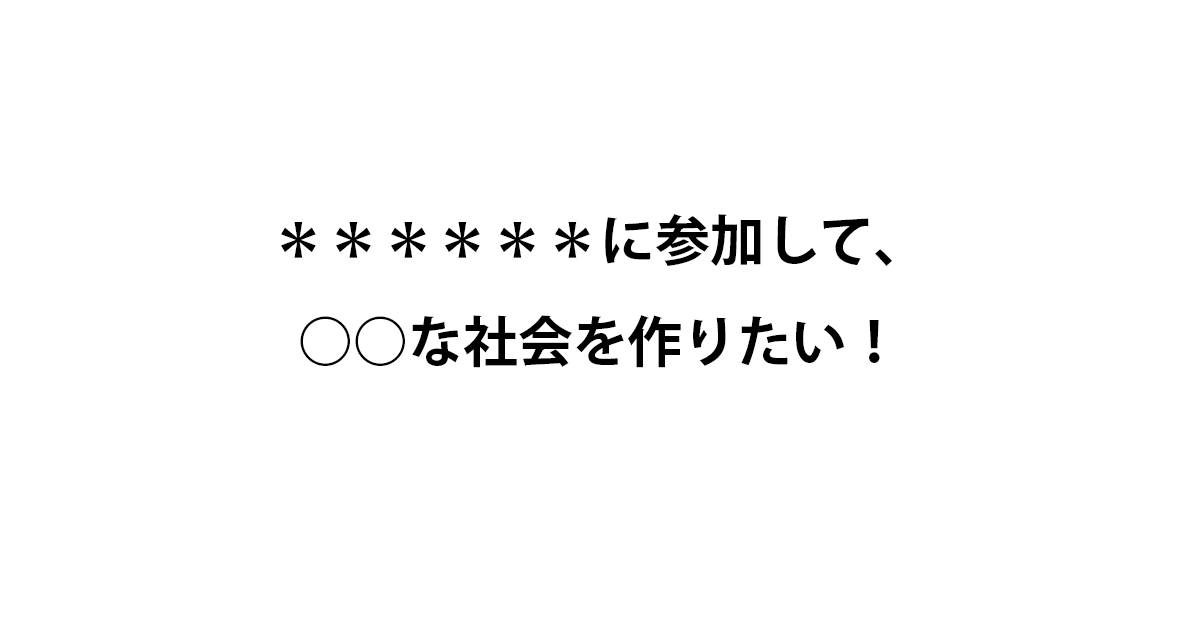
<style>
.page{position:relative;width:1200px;height:630px;background:#ffffff}
.page>*{position:absolute;margin:0}
.t1{font:54.8px/101px "KozGoPr6N-Bold";color:#000000}
</style>
<div class="page">
<p class="t1" style="left:281px;top:214px;width:611px;height:154px;text-align:center">＊＊＊＊＊＊に参加して、<br>○○な社会を作りたい！</p>
</div>
